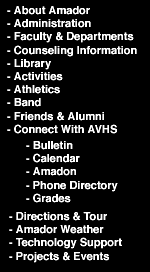
<style>
.page{position:relative;width:150px;height:272px;background:#000000}
.page>*{position:absolute;margin:0}
.t1{font:11px "Helvetica-Bold";color:#ffffff}
</style>
<div class="page">
<p class="t1" style="left:7px;top:6px;width:130px;height:128px">- About Amador<br>- Administration<br>- Faculty &amp; Departments<br>- Counseling Information<br>- Library<br>- Activities<br>- Athletics<br>- Band<br>- Friends &amp; Alumni<br>- Connect With AVHS</p>
<p class="t1" style="left:26px;top:141px;width:92px;height:62px">- Bulletin<br>- Calendar<br>- Amadon<br>- Phone Directory<br>- Grades</p>
<p class="t1" style="left:9px;top:212px;width:113px;height:51px">- Directions &amp; Tour<br>- Amador Weather<br>- Technology Support<br>- Projects &amp; Events</p>
</div>
